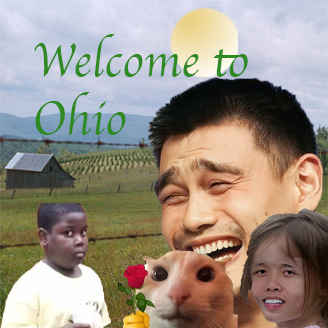
<style>
.page{position:relative;width:328px;height:328px}
.page>*{position:absolute;margin:0}
.t1{font:48px "Apple-Chancery";color:#308a24}
</style>
<div class="page">
<p class="t1" style="left:34px;top:34px;width:214px;height:101px">Welcome to Ohio</p>
</div>
